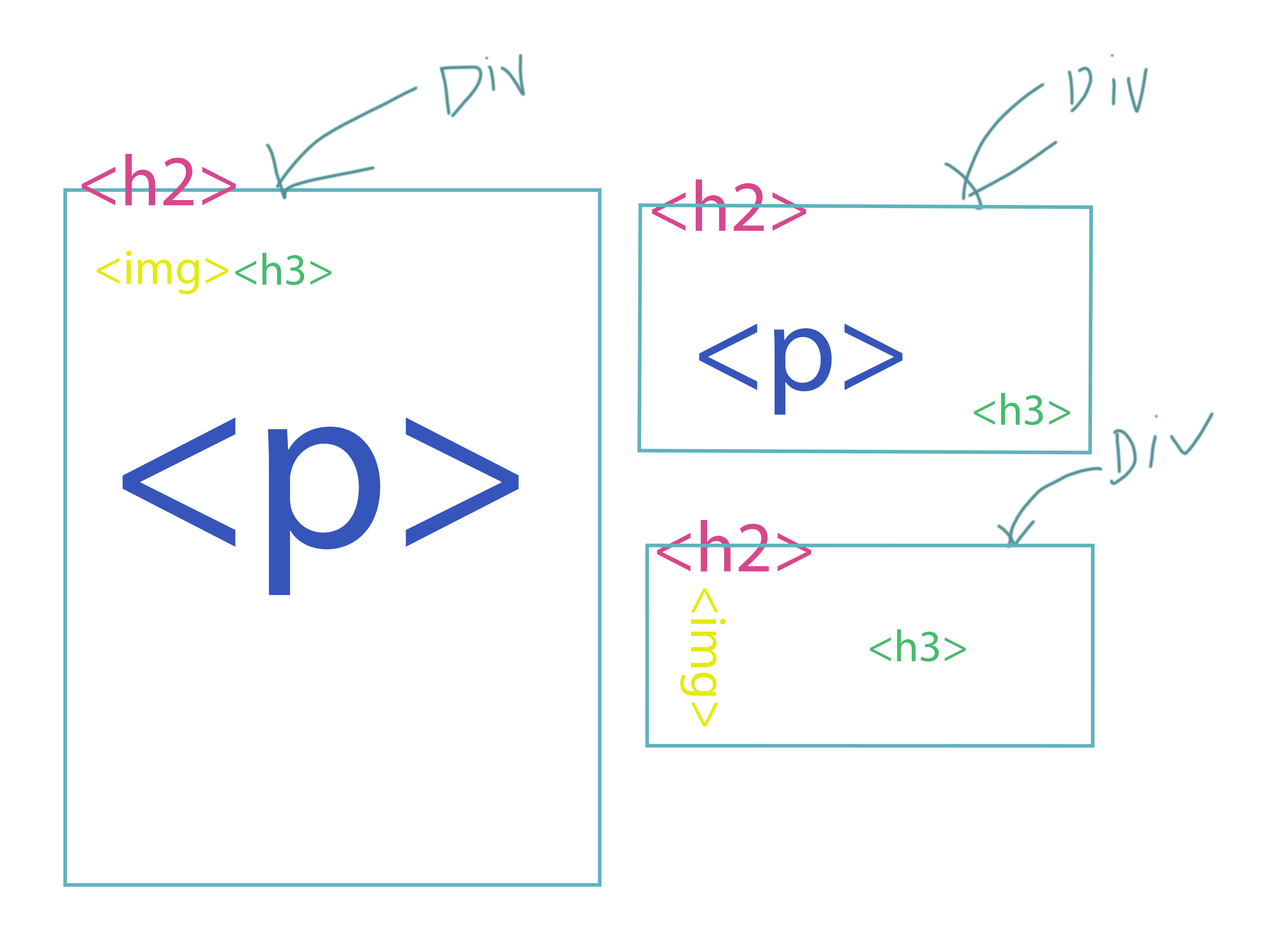
<style>
.page{position:relative;width:1261px;height:946px;background:#ffffff}
.page>*{position:absolute;margin:0}
.t1{font:72.4px "MyriadPro-Regular";color:#d7478d}
.t2{font:48.9px "MyriadPro-Regular";color:#e4eb07}
.t3{font:45px "MyriadPro-Regular";color:#46bb6d}
.t4{font:124.8px "MyriadPro-Regular";color:#3655bb}
.t5{font:243px "MyriadPro-Regular";color:#3655bb}
.t6{font:51.4px "MyriadPro-Regular";color:#e4eb07}
</style>
<div class="page">
<p class="t1" style="left:82px;top:154px;width:154px;height:51px">&lt;h2&gt;</p>
<p class="t1" style="left:652px;top:179px;width:154px;height:52px">&lt;h2&gt;</p>
<p class="t2" style="left:97px;top:251px;width:131px;height:43px">&lt;img&gt;</p>
<p class="t3" style="left:235px;top:253px;width:96px;height:32px">&lt;h3&gt;</p>
<p class="t4" style="left:699px;top:323px;width:204px;height:92px">&lt;p&gt;</p>
<p class="t3" style="left:974px;top:393px;width:96px;height:32px">&lt;h3&gt;</p>
<p class="t5" style="left:123px;top:417px;width:396px;height:178px">&lt;p&gt;</p>
<p class="t1" style="left:657px;top:520px;width:154px;height:51px">&lt;h2&gt;</p>
<p class="t6" style="left:680px;top:588px;width:46px;height:139px;rotate:90deg">&lt;img&gt;</p>
<p class="t3" style="left:870px;top:629px;width:96px;height:33px">&lt;h3&gt;</p>
</div>
